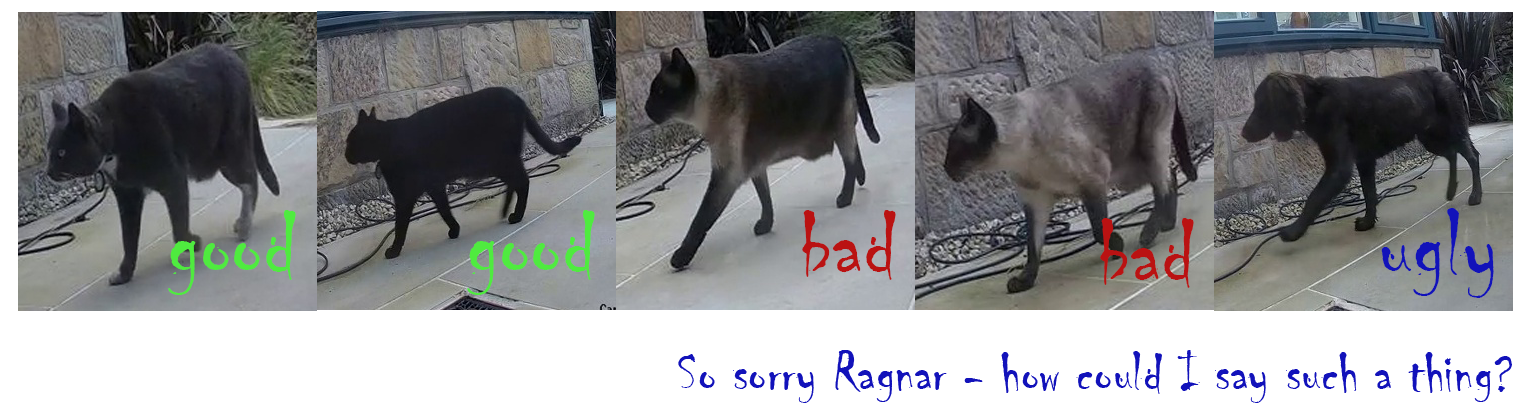
<style>
.page{position:relative;width:1533px;height:419px;background:#ffffff}
.page>*{position:absolute;margin:0}
.t1{font:100px "Chiller-Regular";color:#1212ba}
.t2{font:100px "Chiller-Regular";color:#4feb3f}
.t3{font:100px "Chiller-Regular";color:#ba1212}
.t4{font:58.3px "Chiller-Regular";color:#1212ba}
</style>
<div class="page">
<p class="t1" style="left:1381px;top:208px;width:113px;height:90px">ugly</p>
<p class="t2" style="left:168px;top:210px;width:128px;height:85px">good</p>
<p class="t2" style="left:467px;top:210px;width:128px;height:85px">good</p>
<p class="t3" style="left:802px;top:210px;width:94px;height:70px">bad</p>
<p class="t3" style="left:1100px;top:218px;width:94px;height:70px">bad</p>
<p class="t4" style="left:678px;top:350px;width:834px;height:53px">So sorry Ragnar - how could I say such a thing?</p>
</div>
